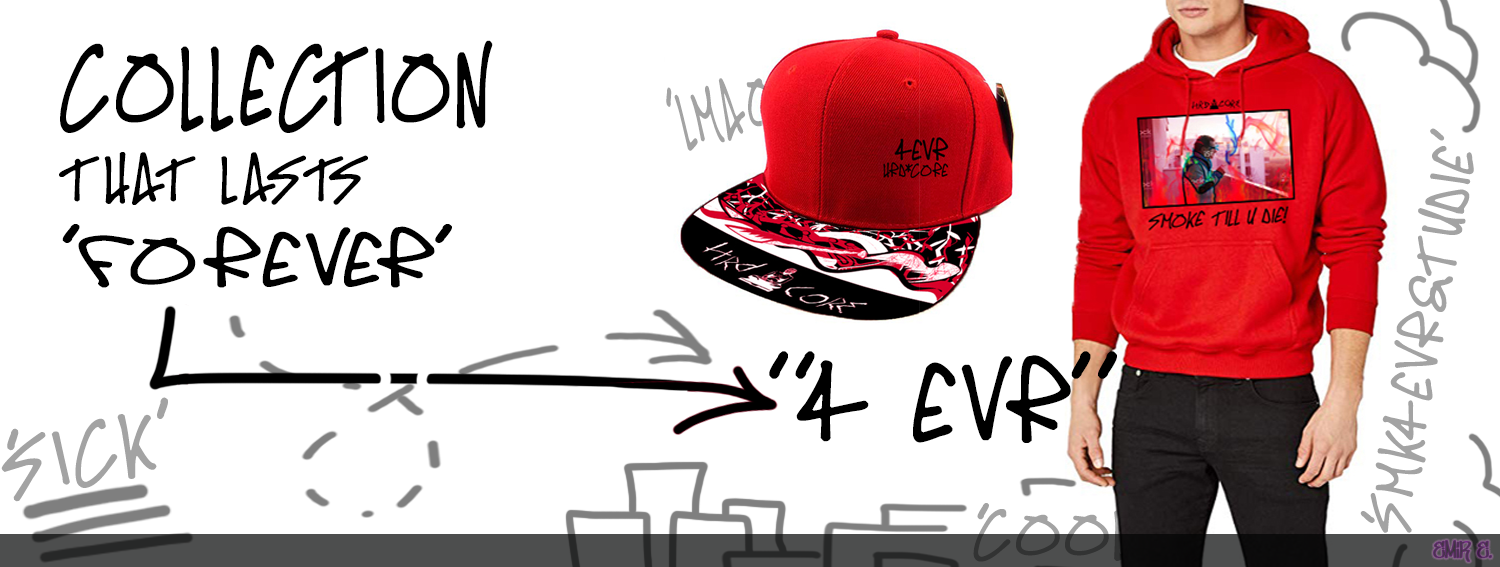
<style>
.page{position:relative;width:1500px;height:567px;background:#ffffff}
.page>*{position:absolute;margin:0}
.t1{font:84.8px "OldschoolTag";letter-spacing:0.05em;color:#000000;text-transform:uppercase;scale:0.86 1}
.t2{font:57.5px "OldschoolTag";letter-spacing:0.05em;color:#a3a3a3;text-transform:uppercase;scale:0.64 1}
.t3{font:45.7px "OldschoolTag";letter-spacing:0.05em;color:#a3a3a3;text-transform:uppercase;scale:1.1 1}
.t4{font:48.2px "OldschoolTag";letter-spacing:0.05em;color:#000000;text-transform:uppercase;scale:1.1 1}
.t5{font:57.9px "OldschoolTag";letter-spacing:0.05em;color:#000000;text-transform:uppercase;scale:1.41 1}
.t6{font:83.5px "OldschoolTag";letter-spacing:0.05em;color:#000000;text-transform:uppercase;scale:1.1 1}
.t7{font:61.6px "OldschoolTag";letter-spacing:0.05em;color:#a3a3a3;text-transform:uppercase;scale:1.09 1}
</style>
<div class="page">
<p class="t1" style="left:60px;top:40px;width:433px;height:93px">Collection</p>
<p class="t2" style="left:666px;top:62px;width:111px;height:89px;rotate:-15deg">‘LMAo’</p>
<p class="t3" style="left:1360px;top:128px;width:114px;height:405px;rotate:-80deg">‘smk4evr&amp;tudie’</p>
<p class="t4" style="left:59px;top:152px;width:309px;height:53px">that lasts</p>
<p class="t5" style="left:62px;top:224px;width:390px;height:64px">‘Forever’</p>
<p class="t6" style="left:769px;top:351px;width:348px;height:92px">“4 Evr”</p>
<p class="t7" style="left:1px;top:397px;width:167px;height:105px;rotate:-12deg">‘Sick’</p>
</div>
